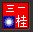
<style>
.page{position:relative;width:33px;height:32px;background:#f20000}
.page>*{position:absolute;margin:0}
.t1{font:10.4px "SimSun";color:#ffffff}
.t2{font:11.7px "SimSun";color:#ffffff}
</style>
<div class="page">
<p class="t1" style="left:6px;top:5px;width:19px;height:7px">三一</p>
<p class="t2" style="left:16px;top:15px;width:11px;height:12px">桂</p>
</div>
